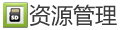
<style>
.page{position:relative;width:120px;height:30px;background:#ffffff}
.page>*{position:absolute;margin:0}
.t1{font:22px "MicrosoftYaHei";color:#3b3b3b;font-variant:small-caps}
</style>
<div class="page">
<p class="t1" style="left:29px;top:4px;width:88px;height:22px">资源管理</p>
</div>
